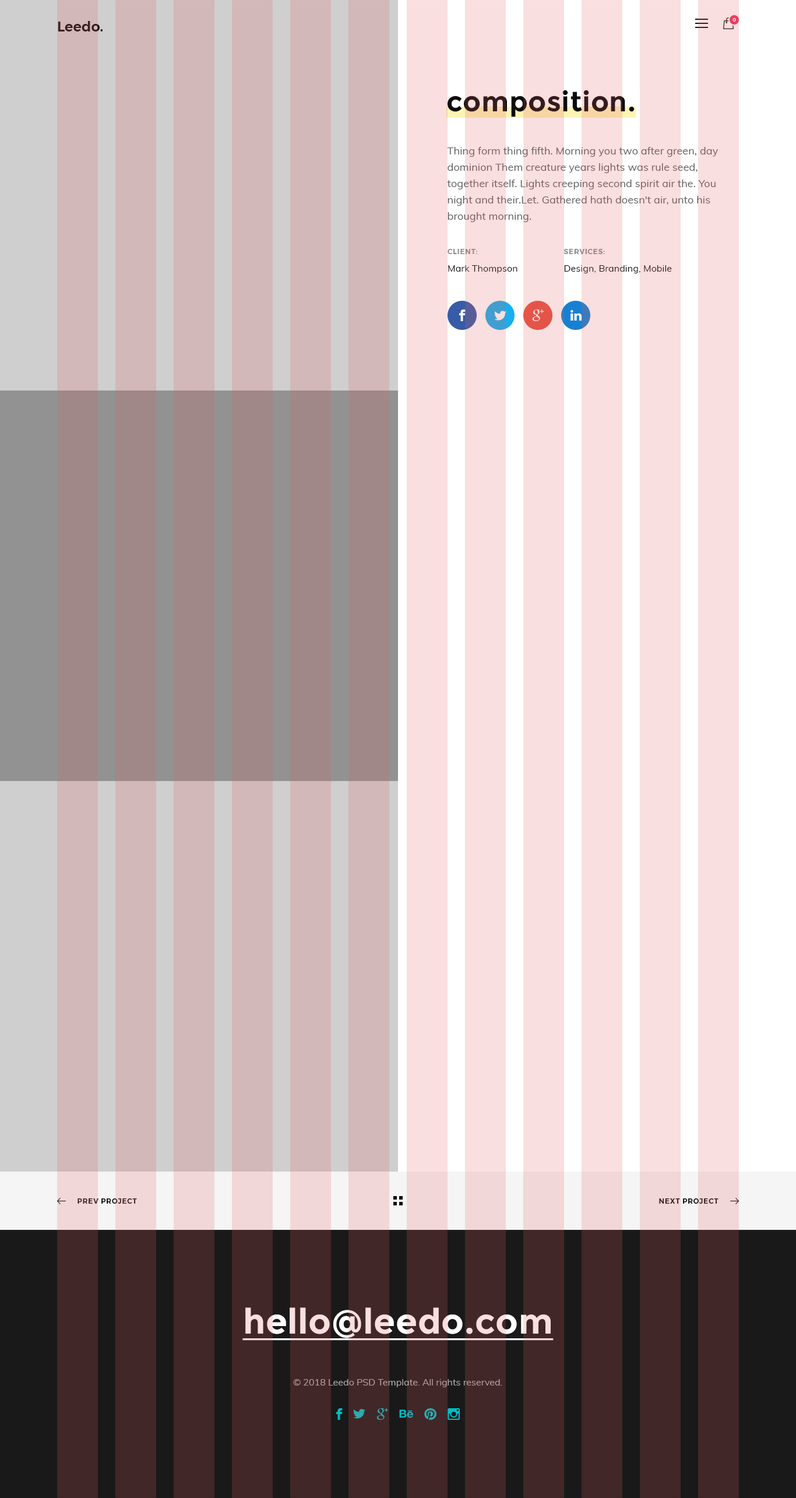
<style>
.page{position:relative;width:796px;height:1498px;background:#f9dfdf}
.page>*{position:absolute;margin:0}
.t1{font:14px "Montserrat-SemiBold";color:#3a2020}
.t2{font:4.7px "Montserrat-Medium";letter-spacing:0.05em;color:#f9dfdf;text-transform:uppercase}
.t3{font:28px "Montserrat-Bold";letter-spacing:0.01em}
.t4{font:10.5px/16.3px "Muli-Regular";letter-spacing:0.005em}
.t5{font:9.3px/17.5px "Muli-Regular";letter-spacing:0.005em;color:#0b0b0b}
.t6{font:7px/17.5px "Montserrat-SemiBold";letter-spacing:0.075em;color:#8a8a8a;text-transform:uppercase}
.t7{font:9.3px/17.5px "Muli-Regular";letter-spacing:0.005em}
.t8{font:7px/29.1px "Montserrat-SemiBold";letter-spacing:0.075em;text-transform:uppercase}
.t9{font:7px "Montserrat-SemiBold";letter-spacing:0.075em;color:#351c1c;text-transform:uppercase}
.t10{font:35px "Montserrat-Bold";letter-spacing:0.01em;color:#f9dfdf;text-decoration:underline}
.t11{font:9.3px "Muli-Regular";color:#a7a7a7}
</style>
<div class="page">
<p class="t1" style="left:58px;top:21px;width:45px;height:10px">Leedo.</p>
<p class="t2" style="left:733px;top:18px;width:3px;height:4px">0</p>
<p class="t3" style="left:448px;top:90px;width:187px;height:27px">composition.</p>
<p class="t4" style="left:447px;top:147px;width:272px;height:75px">Thing form thing fifth. Morning you two after green, day <br>dominion Them creature years lights was rule seed, <br>together itself. Lights creeping second spirit air the. You <br>night and their.Let. Gathered hath doesn't air, unto his <br>brought morning.</p>
<p class="t5" style="left:448px;top:249px;width:70px;height:24px"><span class="t6">client:<br></span>Mark Thompson</p>
<p class="t7" style="left:564px;top:249px;width:108px;height:24px"><span class="t8">services:<br></span>Design, Branding, Mobile</p>
<p class="t9" style="left:78px;top:1198px;width:59px;height:5px">prev project</p>
<p class="t9" style="left:659px;top:1198px;width:60px;height:5px">next project</p>
<p class="t10" style="left:242px;top:1307px;width:312px;height:33px">hello@leedo.com</p>
<p class="t11" style="left:293px;top:1379px;width:209px;height:8px">© 2018 Leedo PSD Template. All rights reserved.</p>
</div>
